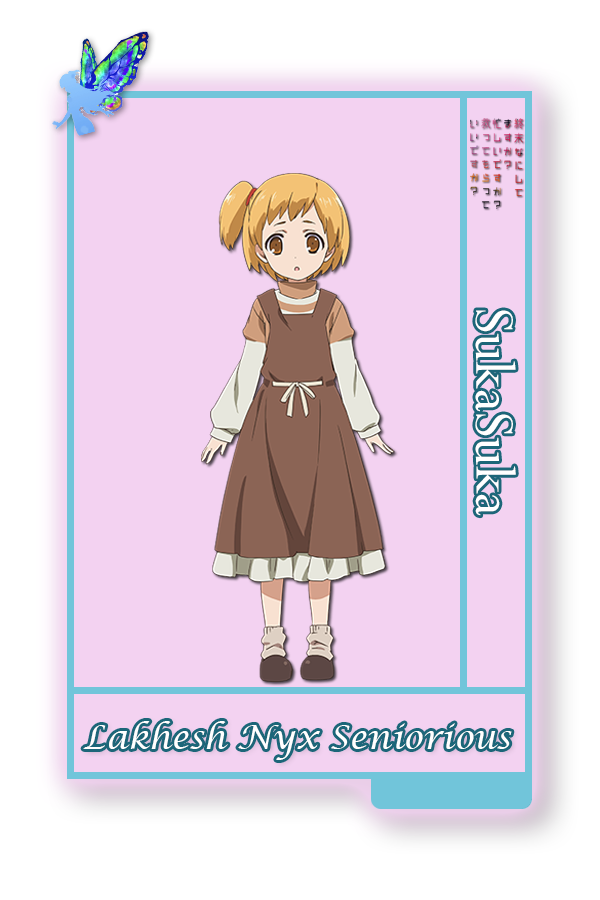
<style>
.page{position:relative;width:600px;height:900px;background:#f3d2f1}
.page>*{position:absolute;margin:0}
.t1{font:62.5px "Perpetua";color:#ffffff}
.t2{font:33.3px "LucidaCalligraphy-Italic";color:#ffffff}
</style>
<div class="page">
<p class="t1" style="left:475px;top:310px;width:41px;height:206px;rotate:90deg">SukaSuka</p>
<p class="t2" style="left:83px;top:721px;width:429px;height:39px">Lakhesh Nyx Seniorious</p>
</div>
